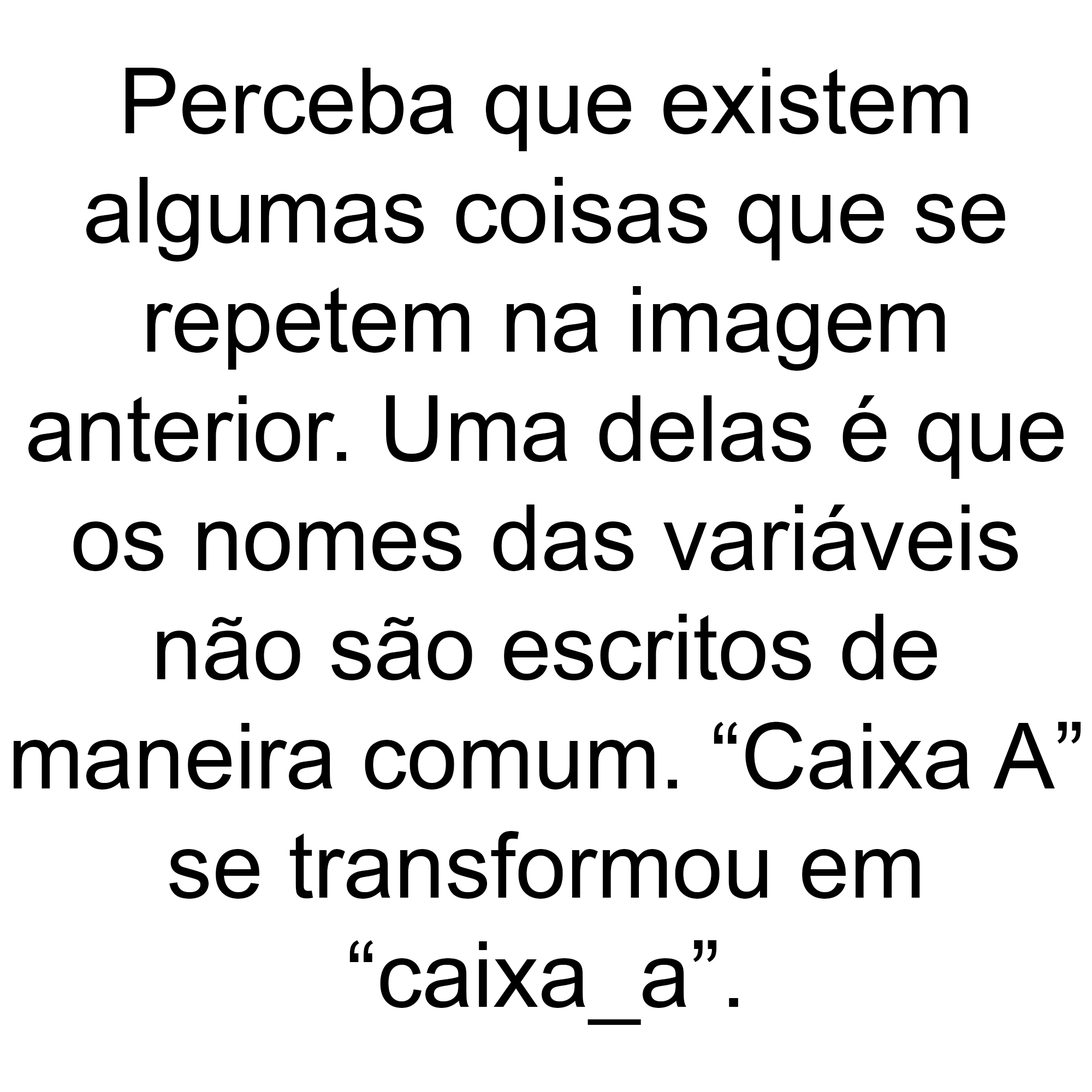
<style>
.page{position:relative;width:1092px;height:1092px;background:#ffffff}
.page>*{position:absolute;margin:0}
.t1{font:91px "ArialMT";color:#000000}
</style>
<div class="page">
<p class="t1" style="left:14px;top:68px;width:1067px;height:957px;text-align:center">Perceba que existem<br>algumas coisas que se<br>repetem na imagem<br>anterior. Uma delas é que<br>os nomes das variáveis<br>não são escritos de<br>maneira comum. “Caixa A”<br>se transformou em<br>“caixa_a”.</p>
</div>
